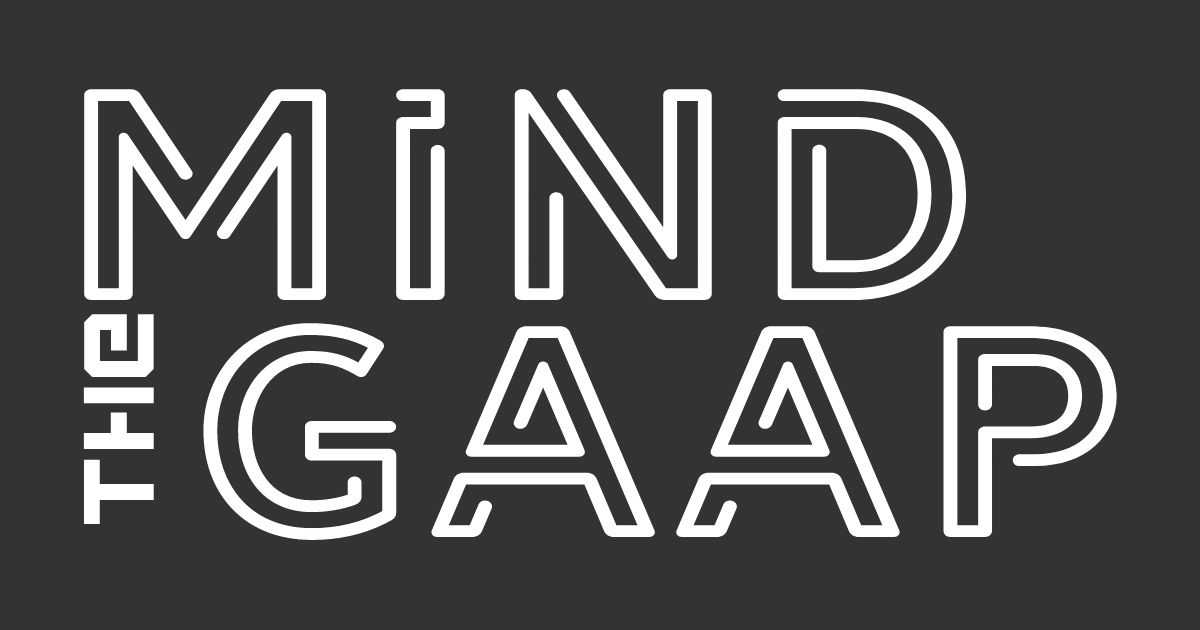
<style>
.page{position:relative;width:1200px;height:630px;background:#333333}
.page>*{position:absolute;margin:0}
.t1{font:281.4px "LIBRARY3AMsoft";color:#ffffff;scale:1.17 1}
.t2{font:232.6px "LIBRARY3AMsoft";color:#ffffff;scale:1.17 1}
.t3{font:105.2px "Loaded";color:#ffffff}
</style>
<div class="page">
<p class="t1" style="left:84px;top:89px;width:1033px;height:451px"><span class="t2"><br></span>MIND<br> GAAP</p>
<p class="t3" style="left:83px;top:314px;width:71px;height:211px;rotate:-90deg">THE</p>
</div>
